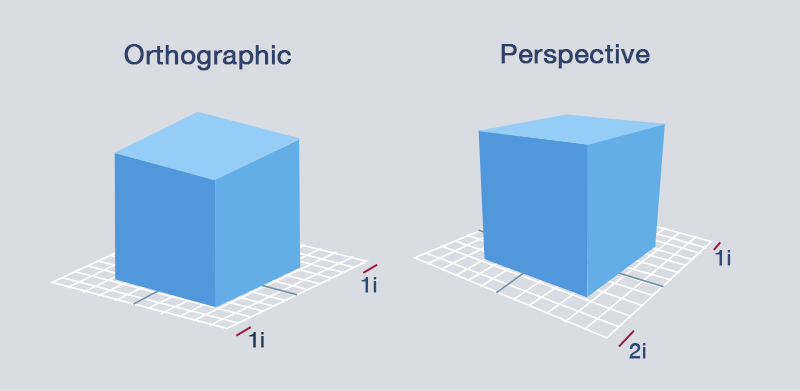
<style>
.page{position:relative;width:800px;height:391px;background:#d9dce3}
.page>*{position:absolute;margin:0}
.t1{font:27.1px "HelveticaNeue";color:#2f4168;font-weight:bold}
.t2{font:21.3px "HelveticaNeue";color:#2f4b75;font-weight:bold}
.t3{font:21.3px "HelveticaNeue";color:#16324d;font-weight:bold}
</style>
<div class="page">
<p class="t1" style="left:124px;top:44px;width:167px;height:27px">Orthographic</p>
<p class="t1" style="left:501px;top:44px;width:149px;height:25px">Perspective</p>
<p class="t2" style="left:715px;top:250px;width:16px;height:16px">1i</p>
<p class="t2" style="left:361px;top:277px;width:16px;height:16px">1i</p>
<p class="t3" style="left:249px;top:332px;width:15px;height:16px">1i</p>
<p class="t2" style="left:629px;top:343px;width:17px;height:16px">2i</p>
</div>
